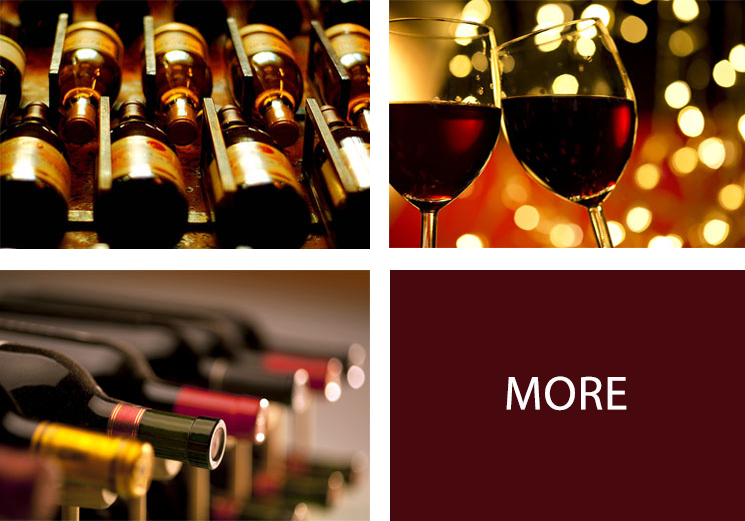
<style>
.page{position:relative;width:745px;height:521px;background:#48090e}
.page>*{position:absolute;margin:0}
.t1{font:48px "MyriadPro-Regular";letter-spacing:0.02em;color:#fdfbfb}
</style>
<div class="page">
<p class="t1" style="left:506px;top:376px;width:121px;height:35px">MORE</p>
</div>
